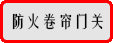
<style>
.page{position:relative;width:113px;height:43px;background:#e5e5e5}
.page>*{position:absolute;margin:0}
.t1{font:12px "FZYTK--GBK1-0"}
.t2{font:16px "FZYTK--GBK1-0";color:#040404}
</style>
<div class="page">
<p class="t1" style="left:12px;top:13px;width:91px;height:17px">防火卷帘门开</p>
<p class="t2" style="left:12px;top:13px;width:91px;height:17px">防火卷帘门关</p>
</div>
